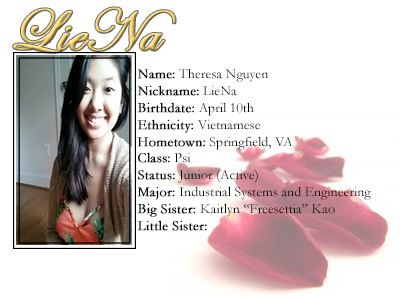
<style>
.page{position:relative;width:400px;height:300px;background:#ffffff}
.page>*{position:absolute;margin:0}
.t1{font:60px "EdwardianScriptITC";font-weight:bold}
.t2{font:14px "Garamond";color:#000000}
.t3{font:14px "Garamond";color:#000000;font-weight:bold}
</style>
<div class="page">
<p class="t1" style="left:13px;top:7px;width:163px;height:46px">LieNa</p>
<p class="t2" style="left:137px;top:68px;width:234px;height:163px"><span class="t3">Name:</span> Theresa Nguyen<br><span class="t3">Nickname:</span> LieNa<br><span class="t3">Birthdate:</span> April 10th<br><span class="t3">Ethnicity:</span> Vietnamese<br><span class="t3">Hometown:</span> Springfield, VA<br><span class="t3">Class:</span> Psi<br><span class="t3">Status:</span> Junior (Active)<br><span class="t3">Major:</span> Industrial Systems and Engineering<br><span class="t3">Big Sister: </span>Kaitlyn “Freesettia” Kao<br><span class="t3">Little Sister:</span></p>
</div>
